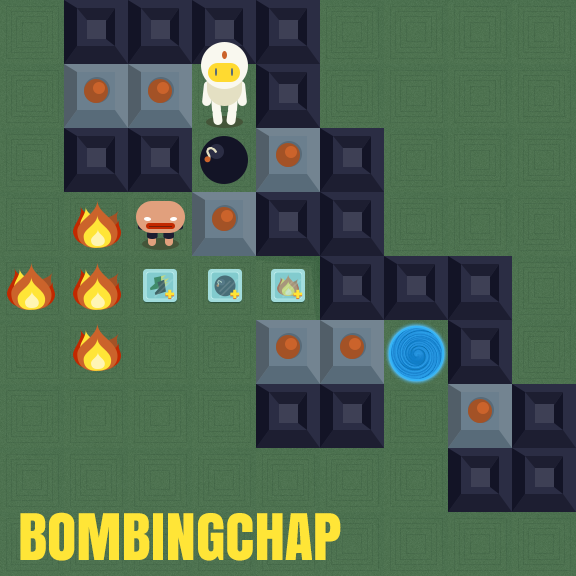
<style>
.page{position:relative;width:576px;height:576px}
.page>*{position:absolute;margin:0}
.t1{font:60px "Anton";color:#ffe537}
</style>
<div class="page">
<p class="t1" style="left:20px;top:512px;width:321px;height:49px">BOMBINGCHAP</p>
</div>
